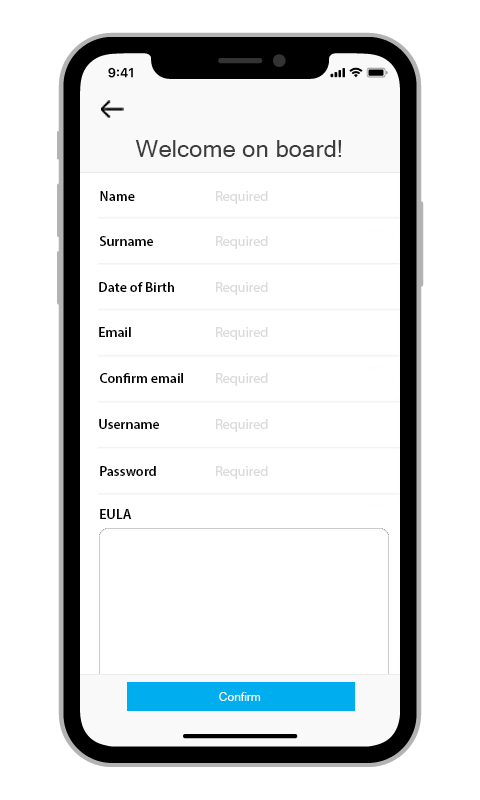
<style>
.page{position:relative;width:480px;height:800px;background:#ffffff}
.page>*{position:absolute;margin:0}
.t1{font:24px "MicrosoftSansSerif";color:#3e3e3e}
.t2{font:14px "MyriadPro-Semibold";color:#000000}
.t3{font:14px "MyriadPro-Regular";color:#dadada}
</style>
<div class="page">
<p class="t1" style="left:135px;top:140px;width:206px;height:17px">Welcome on board!</p>
<p class="t2" style="left:100px;top:191px;width:35px;height:10px">Name</p>
<p class="t3" style="left:216px;top:191px;width:52px;height:13px">Required</p>
<p class="t2" style="left:99px;top:236px;width:54px;height:10px">Surname</p>
<p class="t3" style="left:216px;top:236px;width:52px;height:13px">Required</p>
<p class="t2" style="left:99px;top:282px;width:75px;height:10px">Date of Birth</p>
<p class="t3" style="left:216px;top:282px;width:52px;height:13px">Required</p>
<p class="t2" style="left:99px;top:327px;width:32px;height:10px">Email</p>
<p class="t3" style="left:216px;top:327px;width:52px;height:13px">Required</p>
<p class="t2" style="left:100px;top:373px;width:83px;height:10px">Confirm email</p>
<p class="t3" style="left:216px;top:373px;width:52px;height:13px">Required</p>
<p class="t2" style="left:99px;top:419px;width:60px;height:10px">Username</p>
<p class="t3" style="left:216px;top:419px;width:52px;height:13px">Required</p>
<p class="t2" style="left:100px;top:466px;width:56px;height:10px">Password</p>
<p class="t3" style="left:216px;top:466px;width:52px;height:13px">Required</p>
<p class="t2" style="left:100px;top:509px;width:32px;height:10px">EULA</p>
</div>
